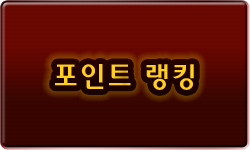
<style>
.page{position:relative;width:250px;height:150px}
.page>*{position:absolute;margin:0}
.t1{font:30px "2002L";letter-spacing:0.05em;color:#ffce21}
</style>
<div class="page">
<p class="t1" style="left:55px;top:64px;width:139px;height:26px">포인트 랭킹</p>
</div>
